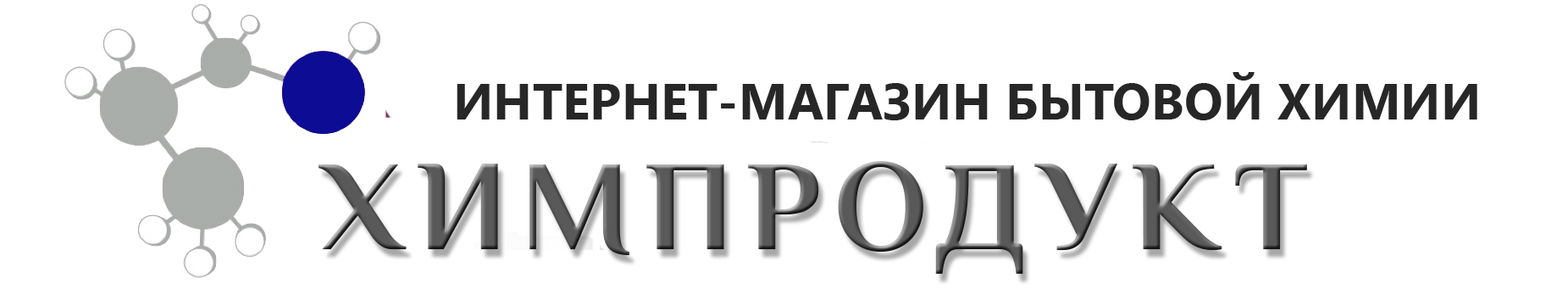
<style>
.page{position:relative;width:1568px;height:289px;background:#ffffff}
.page>*{position:absolute;margin:0}
.t1{font:50.8px "SegoeUI-Bold";letter-spacing:0.005em;color:#272727}
.t2{font:128.8px "Philosopher-Bold";letter-spacing:0.1em;color:#5a5959}
</style>
<div class="page">
<p class="t1" style="left:457px;top:72px;width:1020px;height:48px">ИНТЕРНЕТ-МАГАЗИН БЫТОВОЙ ХИМИИ</p>
<p class="t2" style="left:319px;top:161px;width:988px;height:113px">ХИМПРОДУКТ</p>
</div>
